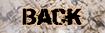
<style>
.page{position:relative;width:105px;height:33px}
.page>*{position:absolute;margin:0}
.t1{font:25.4px "DirtyEgo";color:#000000;scale:1.77 1}
</style>
<div class="page">
<p class="t1" style="left:22px;top:8px;width:61px;height:17px">Back</p>
</div>
